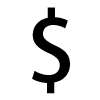
<style>
.page{position:relative;width:100px;height:100px;background:#ffffff}
.page>*{position:absolute;margin:0}
.t1{font:90px "AdobeHeitiStd-Regular";color:#000000}
</style>
<div class="page">
<p class="t1" style="left:32px;top:7px;width:38px;height:87px">$</p>
</div>
